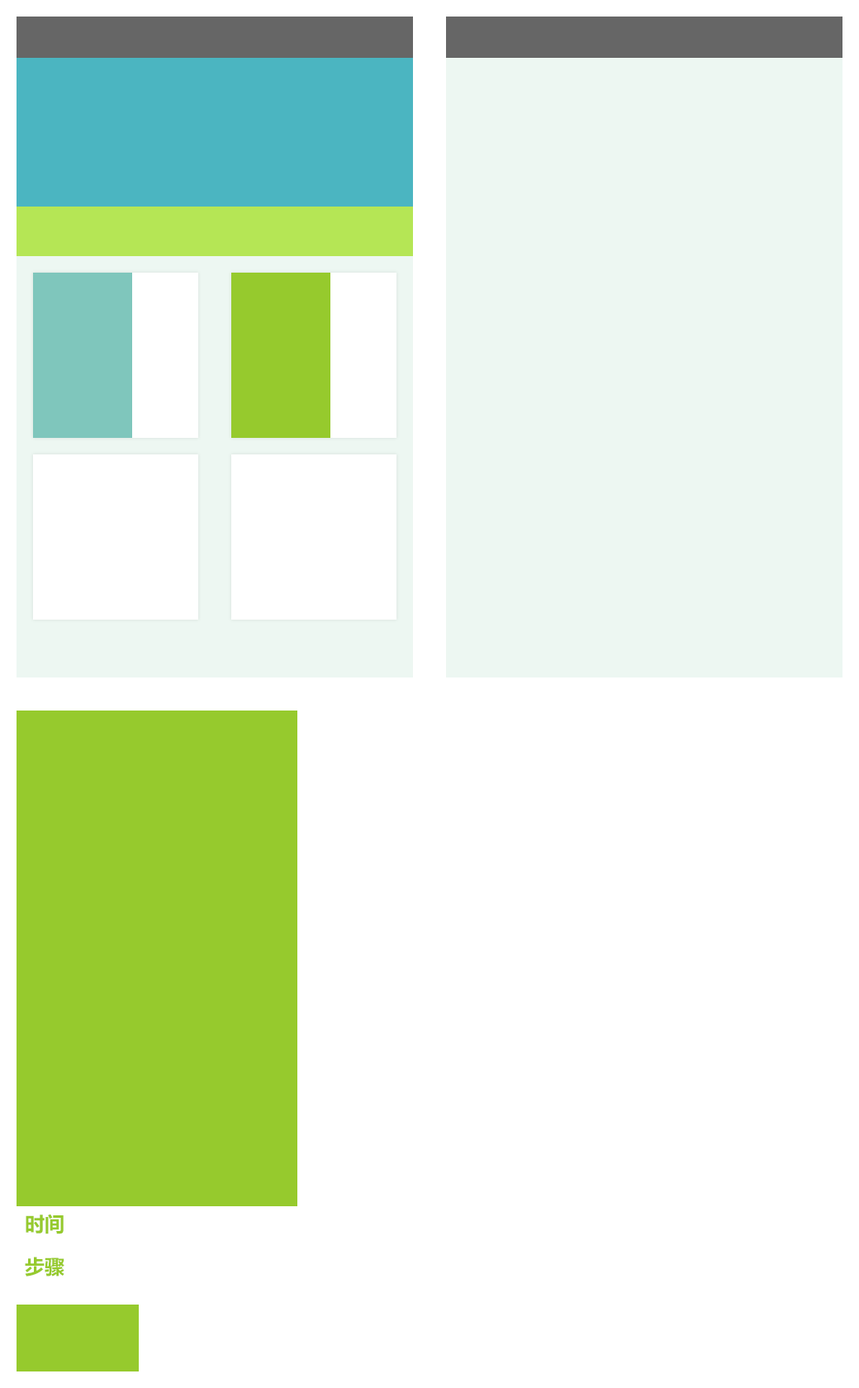
<style>
.page{position:relative;width:859px;height:1388px;background:#ffffff}
.page>*{position:absolute;margin:0}
.t1{font:19.8px "MicrosoftYaHei-Bold";color:#96ca2d}
</style>
<div class="page">
<p class="t1" style="left:26px;top:1214px;width:38px;height:20px">时间</p>
<p class="t1" style="left:25px;top:1257px;width:39px;height:19px">步骤</p>
</div>
